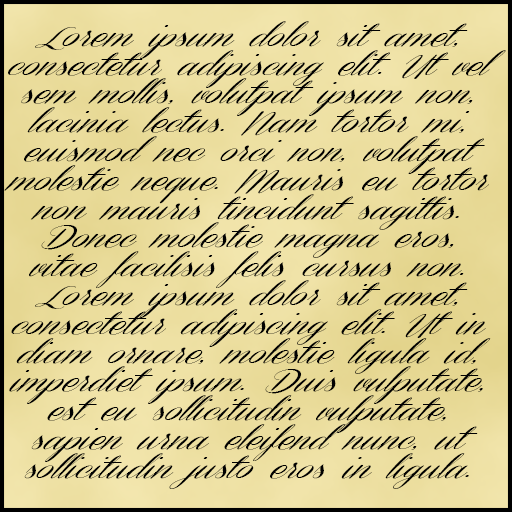
<style>
.page{position:relative;width:512px;height:512px}
.page>*{position:absolute;margin:0}
.t1{font:24px "ConeriaScriptSlantedDemo";color:#010101}
</style>
<div class="page">
<p class="t1" style="left:4px;top:21px;width:502px;height:468px;text-align:center">Lorem ipsum dolor sit amet, consectetur adipiscing elit. Ut vel sem mollis, volutpat ipsum non, lacinia lectus. Nam tortor mi, euismod nec orci non, volutpat molestie neque. Mauris eu tortor non mauris tincidunt sagittis. Donec molestie magna eros, vitae facilisis felis cursus non. Lorem ipsum dolor sit amet, consectetur adipiscing elit. Ut in diam ornare, molestie ligula id, imperdiet ipsum. Duis vulputate, est eu sollicitudin vulputate, sapien urna eleifend nunc, ut sollicitudin justo eros in ligula. Praesent viverra, orci non euismod consectetur, nibh ex maximus purus, et aliquam urna eros nec augue. Mauris dignissim justo a nibh congue porttitor.</p>
</div>
